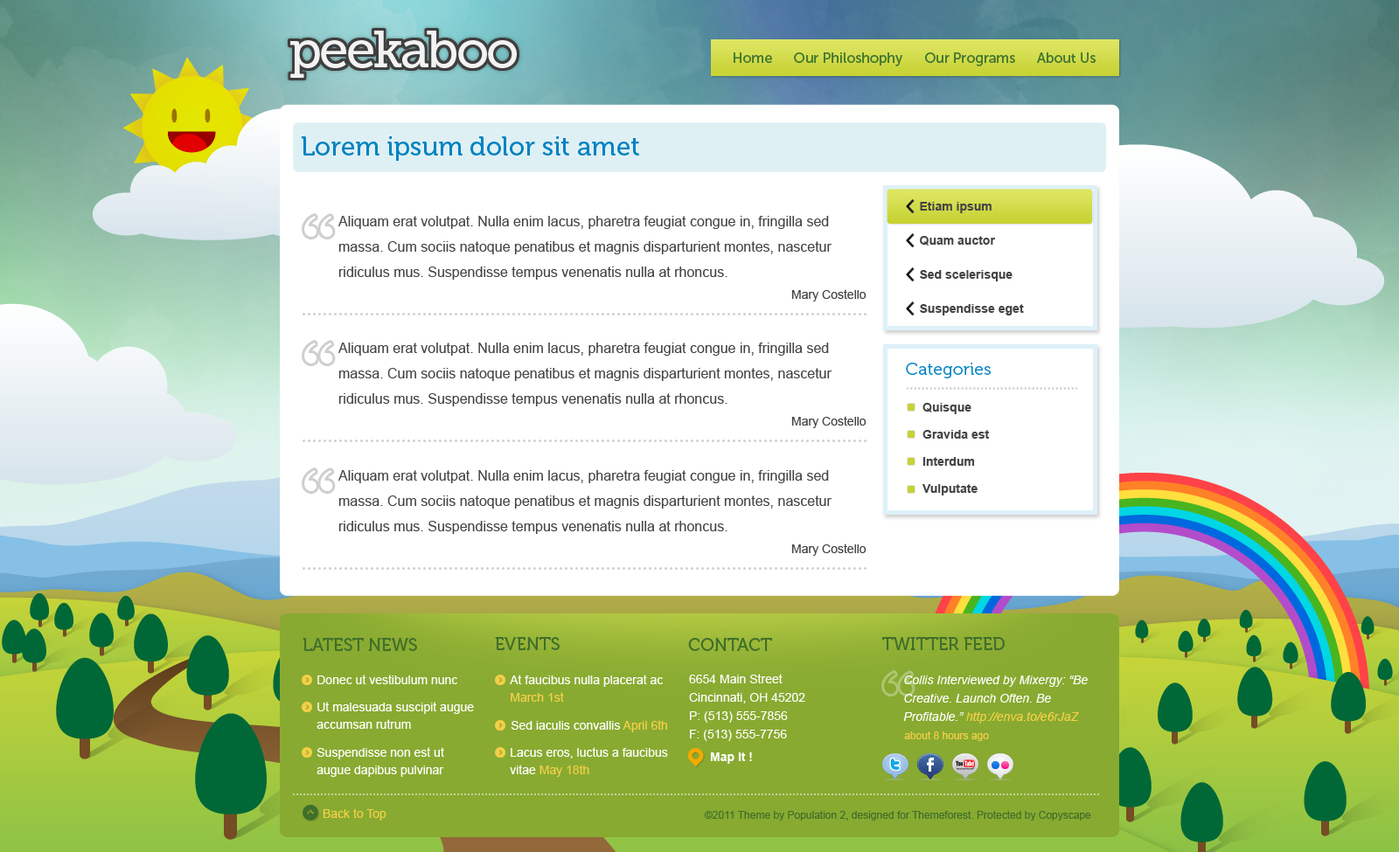
<style>
.page{position:relative;width:1399px;height:852px;background:#ffffff}
.page>*{position:absolute;margin:0}
.t1{font:14px "MuseoSans-500";color:#417630}
.t2{font:26.2px "Museo-500";color:#0082c0}
.t3{font:12.2px/34.1px "Arial-BoldMT";color:#444444}
.t4{font:14px/25.4px "ArialMT";color:#444444}
.t5{font:12.2px "ArialMT";color:#444444}
.t6{font:17.5px "Museo-300";color:#0082c0}
.t7{font:12.2px/27.1px "Arial-BoldMT";color:#444444}
.t8{font:17.5px "Museo-500";color:#406f29;text-transform:uppercase}
.t9{font:12.2px "ArialMT";color:#ffffff}
.t10{font:12.2px/17.5px "ArialMT";color:#ffffff}
.t11{font:12.2px/17.5px "ArialMT";color:#f5cf47}
.t12{font:12.2px/18.4px "ArialMT";color:#ffffff}
.t13{font:12.2px/18.4px "Arial-ItalicMT";color:#ffffff}
.t14{font:12.2px/18.4px "Arial-ItalicMT";color:#f5cf47}
.t15{font:12.2px "ArialMT";color:#f5cf47}
.t16{font:10.5px "ArialMT";color:#f5cf47}
.t17{font:12.2px "Arial-BoldMT";color:#ffffff}
.t18{font:10.5px "ArialMT";color:#406f29}
</style>
<div class="page">
<p class="t1" style="left:734px;top:52px;width:361px;height:14px">Home      Our Philoshophy      Our Programs      About Us</p>
<p class="t2" style="left:302px;top:136px;width:337px;height:25px">Lorem ipsum dolor sit amet</p>
<p class="t3" style="left:920px;top:202px;width:104px;height:114px">Etiam ipsum<br>Quam auctor<br>Sed scelerisque <br>Suspendisse eget</p>
<p class="t4" style="left:338px;top:216px;width:493px;height:64px">Aliquam erat volutpat. Nulla enim lacus, pharetra feugiat congue in, fringilla sed massa. Cum sociis natoque penatibus et magnis disparturient montes, nascetur ridiculus mus. Suspendisse tempus venenatis nulla at rhoncus.</p>
<p class="t5" style="left:791px;top:289px;width:75px;height:13px">Mary Costello</p>
<p class="t4" style="left:338px;top:343px;width:493px;height:64px">Aliquam erat volutpat. Nulla enim lacus, pharetra feugiat congue in, fringilla sed massa. Cum sociis natoque penatibus et magnis disparturient montes, nascetur ridiculus mus. Suspendisse tempus venenatis nulla at rhoncus.</p>
<p class="t6" style="left:906px;top:363px;width:85px;height:16px">Categories</p>
<p class="t7" style="left:922px;top:403px;width:67px;height:93px">Quisque<br>Gravida est<br>Interdum<br>Vulputate</p>
<p class="t5" style="left:791px;top:416px;width:75px;height:12px">Mary Costello</p>
<p class="t4" style="left:338px;top:470px;width:493px;height:64px">Aliquam erat volutpat. Nulla enim lacus, pharetra feugiat congue in, fringilla sed massa. Cum sociis natoque penatibus et magnis disparturient montes, nascetur ridiculus mus. Suspendisse tempus venenatis nulla at rhoncus.</p>
<p class="t5" style="left:791px;top:544px;width:75px;height:12px">Mary Costello</p>
<p class="t8" style="left:303px;top:638px;width:114px;height:13px">Latest News</p>
<p class="t8" style="left:495px;top:637px;width:65px;height:13px">Events</p>
<p class="t8" style="left:688px;top:638px;width:84px;height:13px">Contact</p>
<p class="t8" style="left:882px;top:637px;width:123px;height:13px">Twitter feed</p>
<p class="t9" style="left:317px;top:675px;width:140px;height:10px">Donec ut vestibulum nunc</p>
<p class="t10" style="left:510px;top:675px;width:153px;height:27px">At faucibus nulla placerat ac <span class="t11">March 1st</span></p>
<p class="t12" style="left:689px;top:674px;width:116px;height:67px">6654 Main Street<br>Cincinnati, OH 45202<br>P: (513) 555-7856<br>F: (513) 555-7756</p>
<p class="t13" style="left:903px;top:676px;width:185px;height:48px">Collis Interviewed by Mixergy: “Be Creative. Launch Often. Be<br>Profitable.” <span class="t14">http://enva.to/e6rJaZ</span></p>
<p class="t10" style="left:316px;top:702px;width:158px;height:27px">Ut malesuada suscipit augue accumsan rutrum</p>
<p class="t9" style="left:511px;top:720px;width:156px;height:13px">Sed iaculis convallis <span class="t15">April 6th</span></p>
<p class="t16" style="left:904px;top:732px;width:85px;height:9px">about 8 hours ago</p>
<p class="t10" style="left:316px;top:748px;width:128px;height:29px">Suspendisse non est ut augue dapibus pulvinar</p>
<p class="t10" style="left:510px;top:748px;width:158px;height:29px">Lacus eros, luctus a faucibus vitae <span class="t11">May 18th</span></p>
<p class="t17" style="left:710px;top:753px;width:42px;height:11px">Map It !</p>
<p class="t15" style="left:323px;top:809px;width:63px;height:12px">Back to Top</p>
<p class="t18" style="left:704px;top:811px;width:387px;height:10px">©2011 Theme by Population 2, designed for Themeforest. Protected by Copyscape</p>
</div>
